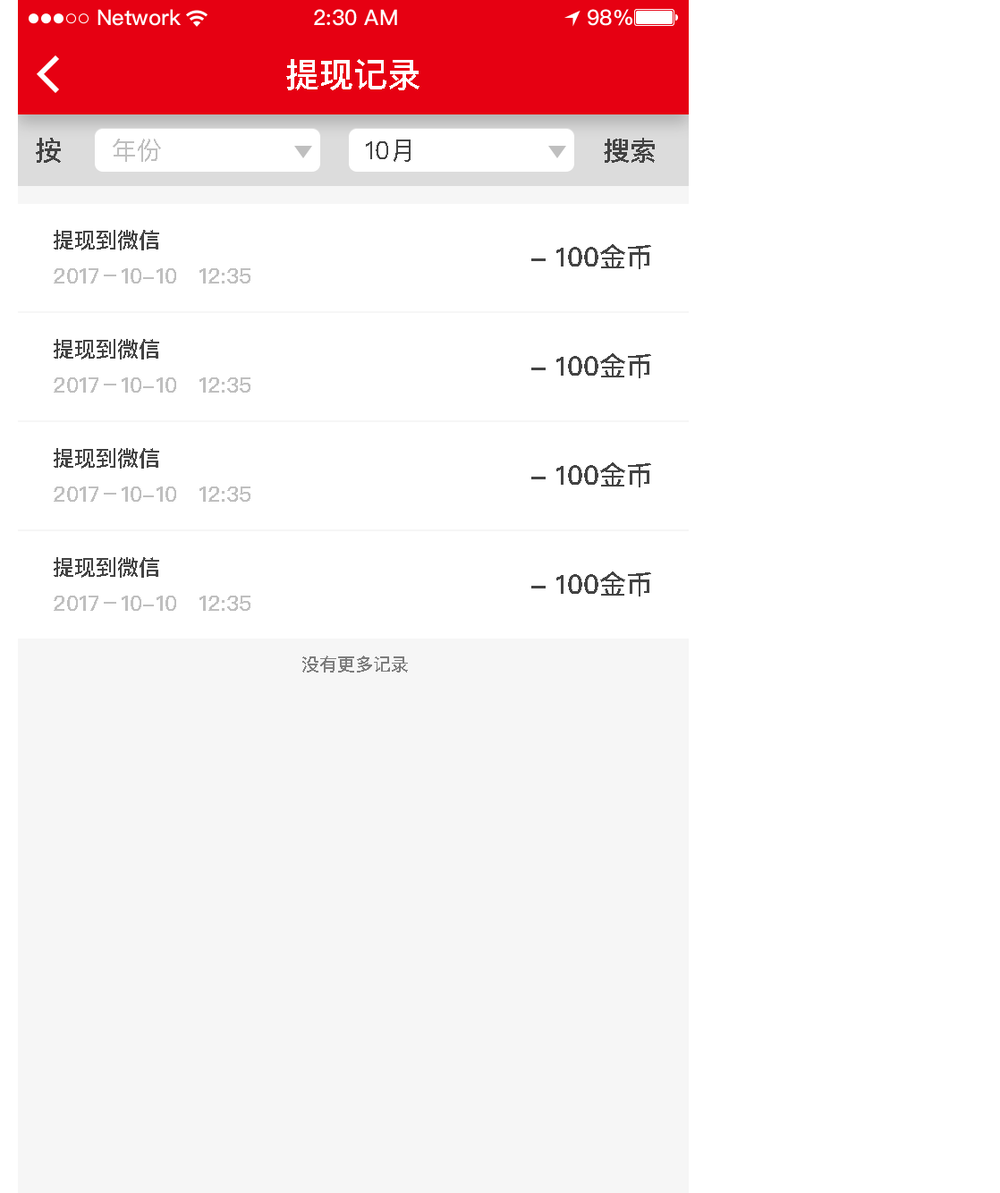
<style>
.page{position:relative;width:1000px;height:1193px;background:#ffffff}
.page>*{position:absolute;margin:0}
.t1{font:34px "PingFangSC-Medium";color:#ffffff;text-transform:uppercase}
.t2{font:26.8px "PingFangSC-Medium";color:#434343;text-transform:uppercase}
.t3{font:25px "PingFangSC-Regular";color:#bfbfbf;text-transform:uppercase}
.t4{font:25px "PingFangSC-Regular";color:#434343;text-transform:uppercase}
.t5{font:21.5px "PingFangSC-Medium";color:#434343;text-transform:uppercase}
.t6{font:21.5px "PingFangSC-Medium";color:#bfbfbf;text-transform:uppercase}
.t7{font:17.9px "PingFangSC-Medium";color:#7d7d7d;text-transform:uppercase}
</style>
<div class="page">
<p class="t1" style="left:286px;top:59px;width:133px;height:31px">提现记录</p>
<p class="t2" style="left:36px;top:138px;width:25px;height:25px">按</p>
<p class="t2" style="left:604px;top:138px;width:51px;height:25px">搜索</p>
<p class="t3" style="left:113px;top:139px;width:48px;height:23px">年份</p>
<p class="t4" style="left:366px;top:139px;width:44px;height:23px">10月</p>
<p class="t5" style="left:54px;top:230px;width:105px;height:20px">提现到微信</p>
<p class="t2" style="left:531px;top:244px;width:120px;height:25px">- 100金币</p>
<p class="t6" style="left:54px;top:268px;width:196px;height:15px">2017－10-10   12:35</p>
<p class="t5" style="left:54px;top:339px;width:105px;height:20px">提现到微信</p>
<p class="t2" style="left:531px;top:353px;width:120px;height:25px">- 100金币</p>
<p class="t6" style="left:54px;top:377px;width:196px;height:16px">2017－10-10   12:35</p>
<p class="t5" style="left:54px;top:448px;width:105px;height:21px">提现到微信</p>
<p class="t2" style="left:531px;top:462px;width:120px;height:25px">- 100金币</p>
<p class="t6" style="left:54px;top:486px;width:196px;height:16px">2017－10-10   12:35</p>
<p class="t5" style="left:54px;top:557px;width:105px;height:21px">提现到微信</p>
<p class="t2" style="left:531px;top:571px;width:120px;height:25px">- 100金币</p>
<p class="t6" style="left:54px;top:596px;width:196px;height:15px">2017－10-10   12:35</p>
<p class="t7" style="left:302px;top:655px;width:106px;height:17px">没有更多记录</p>
</div>
